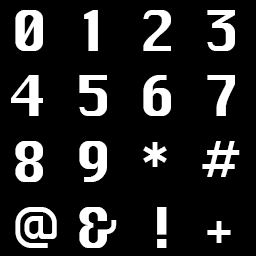
<style>
.page{position:relative;width:256px;height:256px;background:#000000}
.page>*{position:absolute;margin:0}
.t1{font:54.8px "Silom";color:#ffffff}
</style>
<div class="page">
<p class="t1" style="left:11px;top:10px;width:229px;height:238px">0  1  2  3<br>4  5  6  7  <br>8  9  *  #<br>@ &amp;  !  +</p>
</div>
